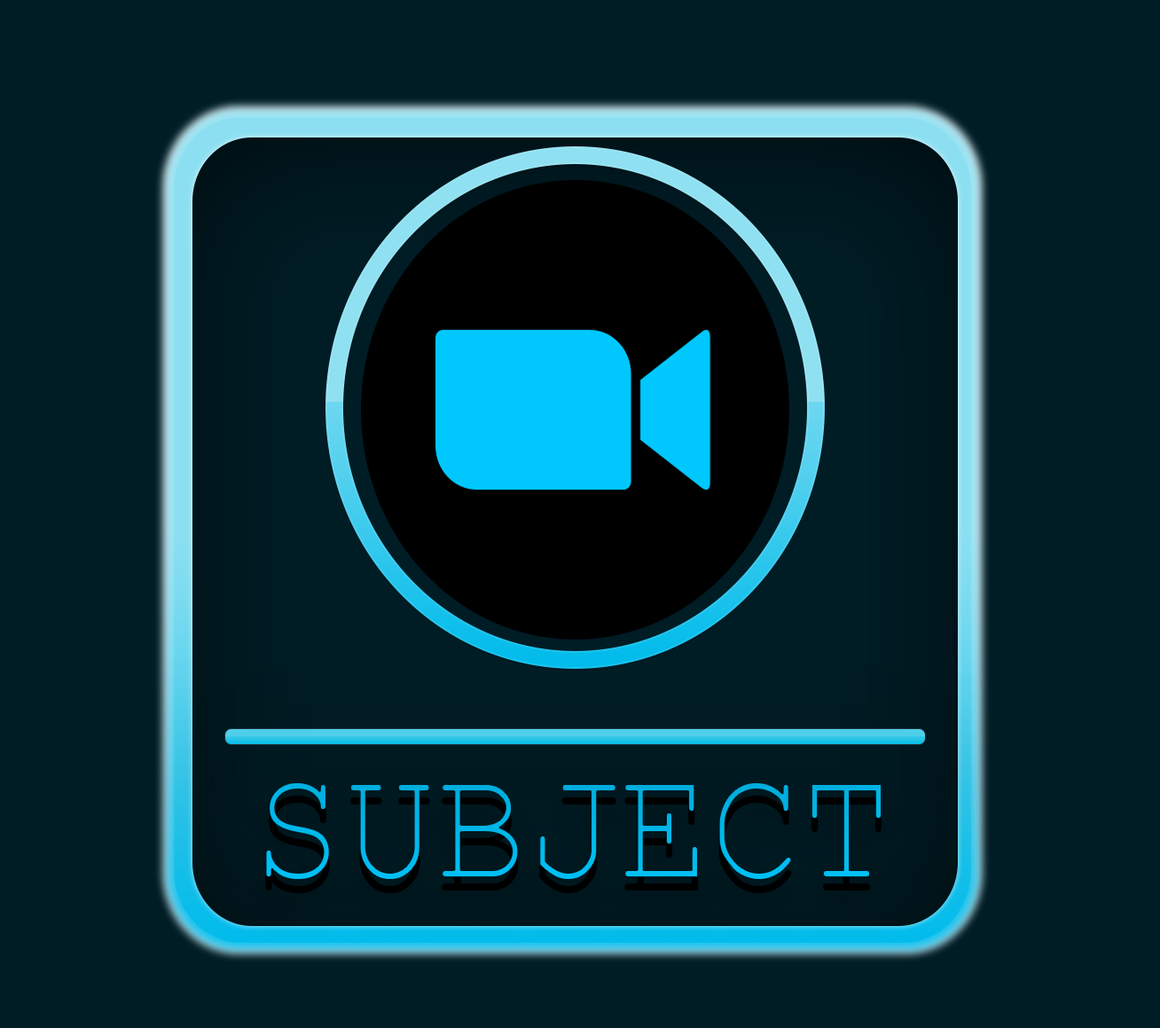
<style>
.page{position:relative;width:1160px;height:1028px;background:#001d26}
.page>*{position:absolute;margin:0}
.t1{font:163.5px "CourierNewPSMT";color:#00b1e2;scale:0.93 1}
</style>
<div class="page">
<p class="t1" style="left:265px;top:782px;width:617px;height:98px">SUBJECT</p>
</div>
